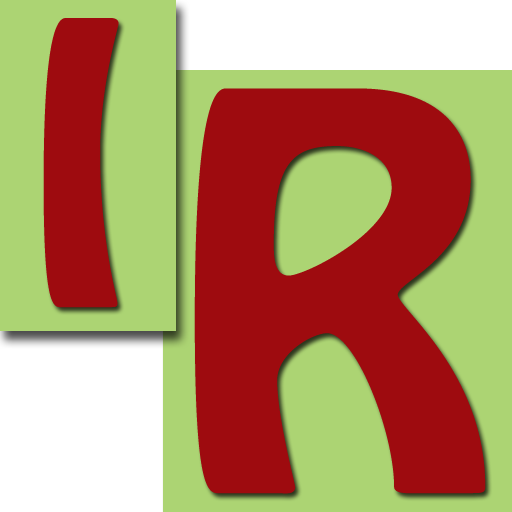
<style>
.page{position:relative;width:512px;height:512px;background:#acd473}
.page>*{position:absolute;margin:0}
.t1{font:347.2px "HoboStd";color:#9e0b0f}
.t2{font:486.1px "HoboStd";color:#9e0b0f}
</style>
<div class="page">
<p class="t1" style="left:43px;top:18px;width:76px;height:290px">I</p>
<p class="t2" style="left:194px;top:88px;width:292px;height:406px">R</p>
</div>
